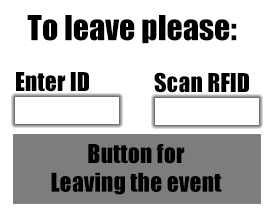
<style>
.page{position:relative;width:271px;height:214px;background:#ffffff}
.page>*{position:absolute;margin:0}
.t1{font:32px "Impact";color:#000000}
.t2{font:24px "Impact";color:#000000}
</style>
<div class="page">
<p class="t1" style="left:27px;top:15px;width:210px;height:29px">To leave please:</p>
<p class="t2" style="left:16px;top:72px;width:73px;height:20px">Enter ID</p>
<p class="t2" style="left:154px;top:72px;width:95px;height:21px">Scan RFID</p>
<p class="t2" style="left:51px;top:144px;width:171px;height:51px;text-align:center">Button for<br>Leaving the event</p>
</div>
